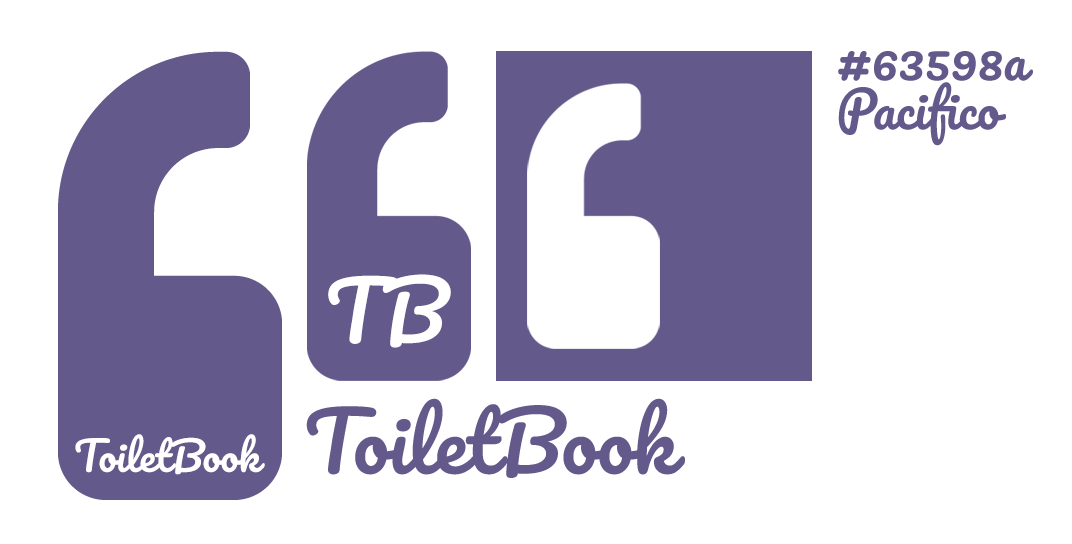
<style>
.page{position:relative;width:1072px;height:544px;background:#ffffff}
.page>*{position:absolute;margin:0}
.t1{font:50px "Pacifico-Regular";color:#63598a}
.t2{font:80px "Pacifico-Regular";color:#ffffff}
.t3{font:80px "Pacifico-Regular";color:#63598a}
.t4{font:40px "Pacifico-Regular";color:#ffffff}
</style>
<div class="page">
<p class="t1" style="left:838px;top:51px;width:195px;height:30px">#63598a</p>
<p class="t1" style="left:838px;top:82px;width:168px;height:64px">Pacifico</p>
<p class="t2" style="left:328px;top:274px;width:123px;height:74px">TB</p>
<p class="t3" style="left:306px;top:398px;width:379px;height:80px">ToiletBook</p>
<p class="t4" style="left:75px;top:434px;width:190px;height:41px">ToiletBook</p>
</div>
